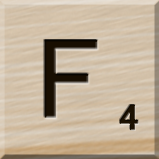
<style>
.page{position:relative;width:159px;height:159px}
.page>*{position:absolute;margin:0}
.t1{font:116px "MS-UIGothic";color:#180e01}
.t2{font:36px "MS-UIGothic";color:#1c1101;font-weight:bold;scale:1.1 1}
</style>
<div class="page">
<p class="t1" style="left:44px;top:40px;width:54px;height:78px">F</p>
<p class="t2" style="left:119px;top:104px;width:20px;height:27px">4</p>
</div>
